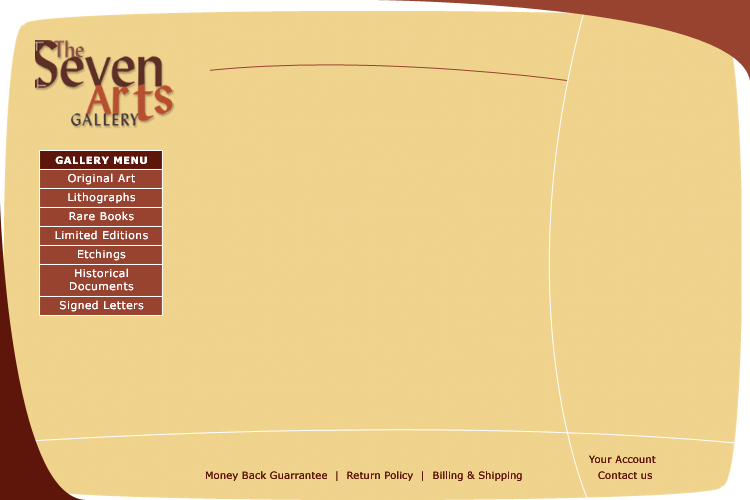
<style>
.page{position:relative;width:750px;height:500px;background:#efd38d}
.page>*{position:absolute;margin:0}
.t1{font:10px "Verdana-Bold";letter-spacing:0.05em;color:#ffffff}
.t2{font:10.7px "Verdana";letter-spacing:0.05em;color:#ffffff}
.t3{font:10.7px/13.2px "Verdana";letter-spacing:0.05em;color:#ffffff}
.t4{font:10px "Verdana";letter-spacing:0.01em;color:#5d1609}
</style>
<div class="page">
<p class="t1" style="left:55px;top:156px;width:92px;height:8px">GALLERY MENU</p>
<p class="t2" style="left:68px;top:173px;width:67px;height:12px">Original Art</p>
<p class="t2" style="left:68px;top:192px;width:67px;height:12px">Lithographs</p>
<p class="t2" style="left:69px;top:211px;width:65px;height:10px">Rare Books</p>
<p class="t2" style="left:55px;top:230px;width:93px;height:10px">Limited Editions</p>
<p class="t2" style="left:78px;top:249px;width:48px;height:12px">Etchings</p>
<p class="t3" style="left:70px;top:268px;width:64px;height:23px;text-align:center">Historical<br>Documents</p>
<p class="t2" style="left:60px;top:300px;width:84px;height:12px">Signed Letters</p>
<p class="t4" style="left:589px;top:455px;width:67px;height:8px">Your Account</p>
<p class="t4" style="left:206px;top:471px;width:316px;height:10px">Money Back Guarrantee  |  Return Policy  |  Billing &amp; Shipping</p>
<p class="t4" style="left:598px;top:471px;width:54px;height:8px">Contact us</p>
</div>
